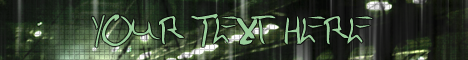
<style>
.page{position:relative;width:468px;height:60px}
.page>*{position:absolute;margin:0}
.t1{font:36px "Pio";color:#99cc99}
</style>
<div class="page">
<p class="t1" style="left:92px;top:13px;width:281px;height:35px">Your Text Here</p>
</div>
